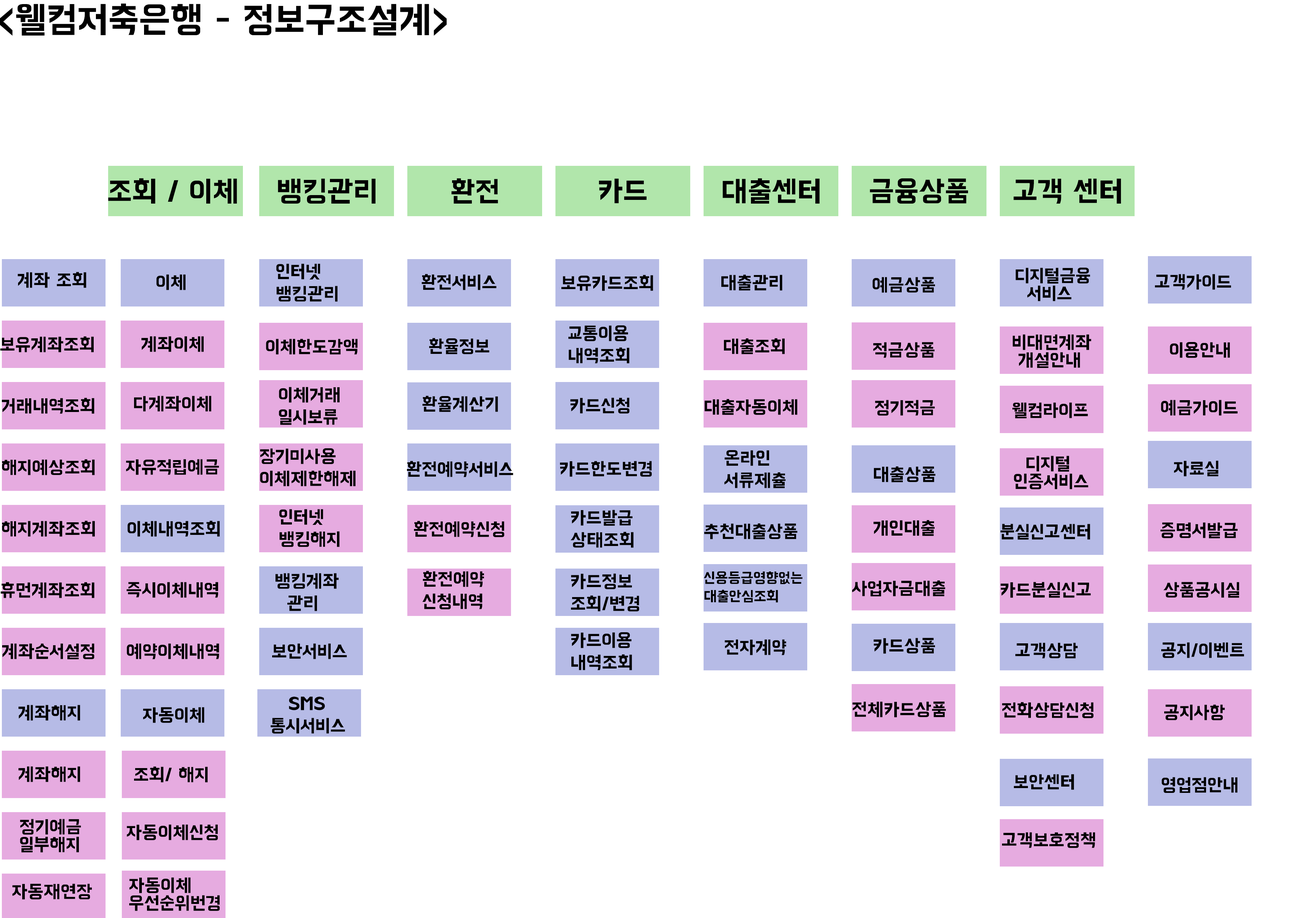
<style>
.page{position:relative;width:1299px;height:918px;background:#ffffff}
.page>*{position:absolute;margin:0}
.t1{font:37px "BMHANNAProOTF";color:#000000}
.t2{font:29.6px "BMHANNAProOTF";color:#000000}
.t3{font:18.5px/22.2px "BMHANNAProOTF";color:#000000}
.t4{font:18.5px/17.8px "BMHANNAProOTF";color:#000000}
.t5{font:18.5px "BMHANNAProOTF";color:#000000}
.t6{font:14.8px/18.5px "BMHANNAProOTF";color:#000000}
</style>
<div class="page">
<p class="t1" style="left:0px;top:3px;width:447px;height:33px">&lt;웰컴저축은행 - 정보구조설계&gt;</p>
<p class="t2" style="left:108px;top:178px;width:129px;height:26px">조회 / 이체</p>
<p class="t2" style="left:278px;top:178px;width:97px;height:26px">뱅킹관리</p>
<p class="t2" style="left:451px;top:178px;width:47px;height:26px">환전</p>
<p class="t2" style="left:599px;top:178px;width:47px;height:25px">카드</p>
<p class="t2" style="left:722px;top:178px;width:98px;height:26px">대출센터</p>
<p class="t2" style="left:870px;top:178px;width:98px;height:26px">금융상품</p>
<p class="t2" style="left:1013px;top:178px;width:108px;height:26px">고객 센터</p>
<p class="t3" style="left:276px;top:264px;width:62px;height:38px">인터넷 <br>뱅킹관리</p>
<p class="t4" style="left:1016px;top:268px;width:74px;height:33px">디지털금융<br>  서비스</p>
<p class="t5" style="left:18px;top:272px;width:68px;height:16px">계좌 조회</p>
<p class="t5" style="left:156px;top:274px;width:29px;height:16px">이체</p>
<p class="t5" style="left:422px;top:274px;width:74px;height:16px">환전서비스</p>
<p class="t5" style="left:561px;top:275px;width:92px;height:16px">보유카드조회</p>
<p class="t5" style="left:721px;top:275px;width:61px;height:16px">대출관리</p>
<p class="t5" style="left:872px;top:277px;width:63px;height:16px">예금상품</p>
<p class="t5" style="left:1155px;top:274px;width:76px;height:16px">고객가이드</p>
<p class="t3" style="left:568px;top:325px;width:61px;height:39px">교통이용<br>내역조회</p>
<p class="t5" style="left:0px;top:336px;width:94px;height:16px">보유계좌조회</p>
<p class="t5" style="left:141px;top:336px;width:63px;height:16px">계좌이체</p>
<p class="t5" style="left:266px;top:339px;width:92px;height:16px">이체한도감액</p>
<p class="t5" style="left:429px;top:338px;width:60px;height:16px">환율정보</p>
<p class="t5" style="left:724px;top:338px;width:60px;height:16px">대출조회</p>
<p class="t4" style="left:1013px;top:334px;width:78px;height:34px">비대면계좌<br> 개설안내</p>
<p class="t5" style="left:873px;top:342px;width:61px;height:16px">적금상품</p>
<p class="t5" style="left:1170px;top:342px;width:60px;height:16px">이용안내</p>
<p class="t3" style="left:279px;top:387px;width:60px;height:38px">이체거래<br>일시보류</p>
<p class="t5" style="left:2px;top:398px;width:92px;height:16px">거래내역조회</p>
<p class="t5" style="left:134px;top:396px;width:77px;height:16px">다계좌이체</p>
<p class="t5" style="left:422px;top:396px;width:76px;height:16px">환율계산기</p>
<p class="t5" style="left:570px;top:398px;width:59px;height:16px">카드신청</p>
<p class="t5" style="left:705px;top:399px;width:92px;height:16px">대출자동이체</p>
<p class="t5" style="left:875px;top:400px;width:60px;height:16px">정기적금</p>
<p class="t5" style="left:1161px;top:400px;width:76px;height:16px">예금가이드</p>
<p class="t5" style="left:1012px;top:402px;width:76px;height:16px">웰컴라이프</p>
<p class="t3" style="left:260px;top:448px;width:95px;height:38px">장기미사용<br>이체제한해제</p>
<p class="t5" style="left:2px;top:459px;width:93px;height:16px">해지예상조회</p>
<p class="t5" style="left:126px;top:459px;width:93px;height:16px">자유적립예금</p>
<p class="t5" style="left:407px;top:461px;width:106px;height:16px">환전예약서비스</p>
<p class="t5" style="left:560px;top:461px;width:92px;height:16px">카드한도변경</p>
<p class="t3" style="left:724px;top:450px;width:62px;height:38px">온라인<br>서류제츌</p>
<p class="t4" style="left:1014px;top:456px;width:74px;height:33px">디지털 <br>인증서비스</p>
<p class="t5" style="left:1174px;top:461px;width:44px;height:15px">자료실</p>
<p class="t5" style="left:874px;top:466px;width:61px;height:16px">대출상품</p>
<p class="t3" style="left:279px;top:509px;width:60px;height:38px">인터넷<br>뱅킹해지</p>
<p class="t3" style="left:570px;top:510px;width:63px;height:38px">카드발급<br>상태조회</p>
<p class="t5" style="left:2px;top:521px;width:93px;height:16px">해지계좌조회</p>
<p class="t5" style="left:127px;top:521px;width:93px;height:16px">이체내역조회</p>
<p class="t5" style="left:414px;top:521px;width:90px;height:16px">환전예약신청</p>
<p class="t5" style="left:873px;top:520px;width:61px;height:16px">개인대출</p>
<p class="t5" style="left:704px;top:523px;width:93px;height:16px">추천대출상품</p>
<p class="t5" style="left:1000px;top:524px;width:90px;height:16px">분실신고센터</p>
<p class="t5" style="left:1160px;top:522px;width:78px;height:17px">증명서발급</p>
<p class="t5" style="left:1px;top:582px;width:93px;height:16px">휴먼계좌조회</p>
<p class="t5" style="left:127px;top:582px;width:91px;height:16px">즉시이체내역</p>
<p class="t3" style="left:275px;top:573px;width:64px;height:38px">뱅킹계좌<br>  관리</p>
<p class="t3" style="left:422px;top:571px;width:62px;height:38px">환전예약<br>신청내역</p>
<p class="t3" style="left:571px;top:573px;width:68px;height:39px">카드정보<br>조회/변경</p>
<p class="t6" style="left:703px;top:571px;width:99px;height:32px">신용등급영향없는<br>대출안심조회</p>
<p class="t5" style="left:852px;top:581px;width:93px;height:15px">사업자금대출</p>
<p class="t5" style="left:1000px;top:582px;width:91px;height:16px">카드분실신고</p>
<p class="t5" style="left:1163px;top:582px;width:76px;height:16px">상품공시실</p>
<p class="t3" style="left:571px;top:632px;width:61px;height:38px">카드이용<br>내역조회</p>
<p class="t5" style="left:725px;top:639px;width:61px;height:16px">전자계약</p>
<p class="t5" style="left:873px;top:638px;width:62px;height:16px">카드상품</p>
<p class="t5" style="left:2px;top:643px;width:92px;height:16px">계좌순서설정</p>
<p class="t5" style="left:127px;top:643px;width:92px;height:16px">예약이체내역</p>
<p class="t5" style="left:272px;top:643px;width:75px;height:16px">보안서비스</p>
<p class="t5" style="left:1015px;top:643px;width:63px;height:16px">고객상담</p>
<p class="t5" style="left:1161px;top:642px;width:83px;height:16px">공지/이벤트</p>
<p class="t3" style="left:271px;top:697px;width:74px;height:37px">SMS<br>통시서비스</p>
<p class="t5" style="left:852px;top:702px;width:94px;height:15px">전체카드상품</p>
<p class="t5" style="left:1002px;top:702px;width:91px;height:16px">전화상담신청</p>
<p class="t5" style="left:19px;top:705px;width:61px;height:16px">계좌해지</p>
<p class="t5" style="left:143px;top:707px;width:61px;height:16px">자동이체</p>
<p class="t5" style="left:1164px;top:705px;width:61px;height:15px">공지사항</p>
<p class="t5" style="left:19px;top:766px;width:61px;height:16px">계좌해지</p>
<p class="t5" style="left:134px;top:766px;width:74px;height:17px">조회/ 해지</p>
<p class="t5" style="left:1014px;top:774px;width:60px;height:16px">보안센터</p>
<p class="t5" style="left:1161px;top:777px;width:76px;height:16px">영업점안내</p>
<p class="t4" style="left:20px;top:819px;width:61px;height:34px">정기예금 <br>일부해지</p>
<p class="t5" style="left:127px;top:824px;width:91px;height:16px">자동이체신청</p>
<p class="t5" style="left:1002px;top:832px;width:93px;height:16px">고객보호정책</p>
<p class="t4" style="left:129px;top:877px;width:91px;height:34px">자동이체 <br>우선순위번경</p>
<p class="t5" style="left:12px;top:884px;width:80px;height:16px">자동재연장</p>
</div>
